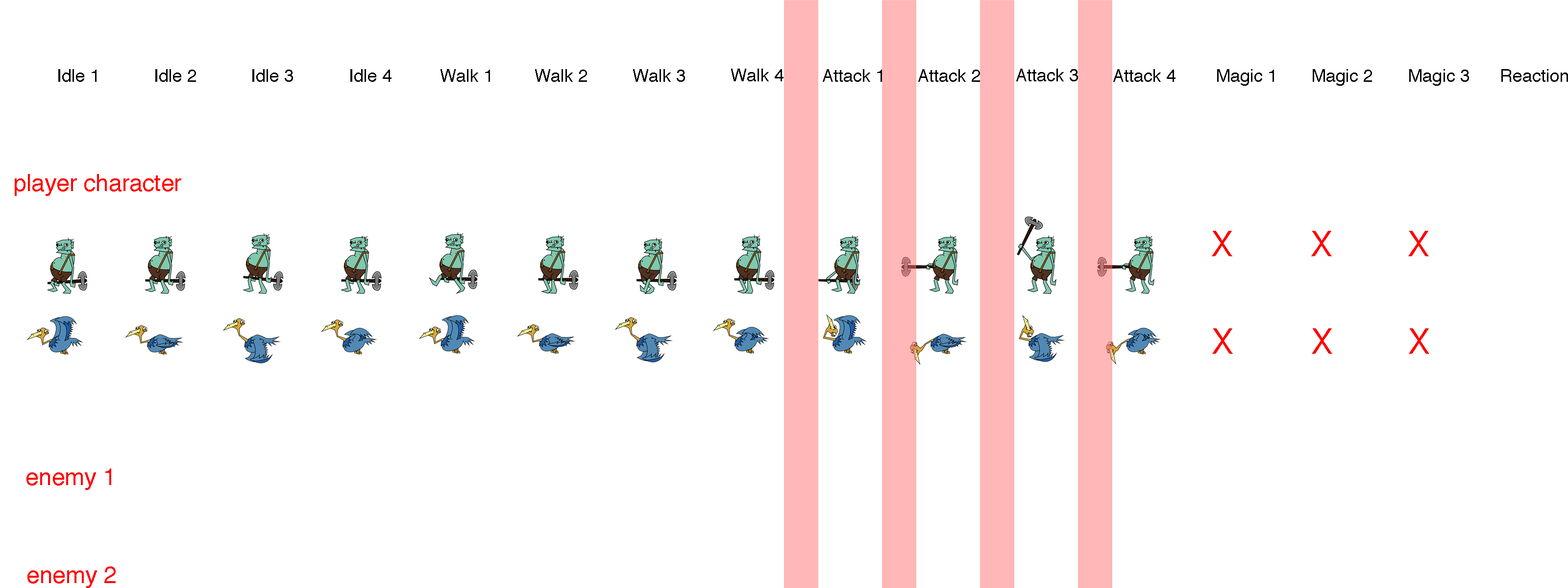
<style>
.page{position:relative;width:1568px;height:588px;background:#ffffff}
.page>*{position:absolute;margin:0}
.t1{font:17.6px "Helvetica";color:#000000}
.t2{font:23.5px "Helvetica";color:#ff0000}
.t3{font:35.3px "Helvetica";color:#ff0000}
</style>
<div class="page">
<p class="t1" style="left:58px;top:69px;width:39px;height:13px">Idle 1</p>
<p class="t1" style="left:155px;top:69px;width:41px;height:13px">Idle 2</p>
<p class="t1" style="left:252px;top:69px;width:41px;height:13px">Idle 3</p>
<p class="t1" style="left:350px;top:69px;width:42px;height:13px">Idle 4</p>
<p class="t1" style="left:441px;top:69px;width:49px;height:13px">Walk 1</p>
<p class="t1" style="left:535px;top:69px;width:52px;height:13px">Walk 2</p>
<p class="t1" style="left:633px;top:69px;width:52px;height:13px">Walk 3</p>
<p class="t1" style="left:731px;top:69px;width:53px;height:12px">Walk 4</p>
<p class="t1" style="left:823px;top:69px;width:59px;height:13px">Attack 1</p>
<p class="t1" style="left:918px;top:69px;width:62px;height:13px">Attack 2</p>
<p class="t1" style="left:1016px;top:69px;width:62px;height:12px">Attack 3</p>
<p class="t1" style="left:1113px;top:69px;width:63px;height:13px">Attack 4</p>
<p class="t1" style="left:1217px;top:69px;width:57px;height:17px">Magic 1</p>
<p class="t1" style="left:1313px;top:69px;width:59px;height:17px">Magic 2</p>
<p class="t1" style="left:1409px;top:69px;width:60px;height:17px">Magic 3</p>
<p class="t1" style="left:1501px;top:69px;width:67px;height:13px">Reaction</p>
<p class="t2" style="left:15px;top:174px;width:166px;height:22px">player character</p>
<p class="t3" style="left:1212px;top:231px;width:20px;height:25px">X</p>
<p class="t3" style="left:1311px;top:231px;width:21px;height:25px">X</p>
<p class="t3" style="left:1408px;top:231px;width:21px;height:25px">X</p>
<p class="t3" style="left:1212px;top:328px;width:21px;height:26px">X</p>
<p class="t3" style="left:1312px;top:328px;width:20px;height:26px">X</p>
<p class="t3" style="left:1409px;top:328px;width:20px;height:26px">X</p>
<p class="t2" style="left:26px;top:468px;width:85px;height:22px">enemy 1</p>
<p class="t2" style="left:27px;top:566px;width:89px;height:22px">enemy 2</p>
</div>
